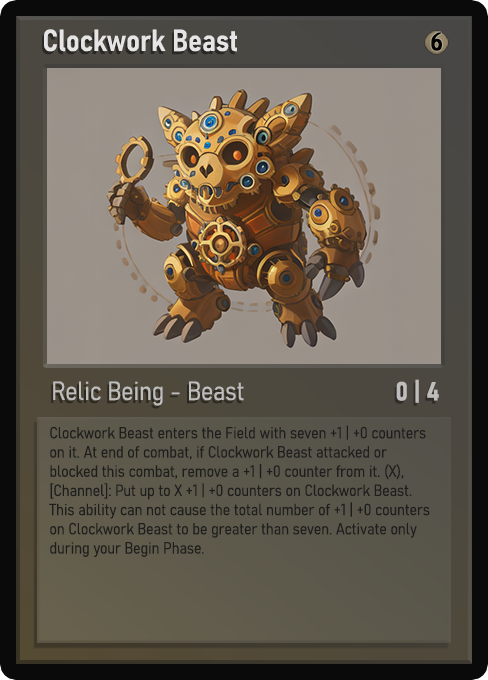
<style>
.page{position:relative;width:488px;height:680px}
.page>*{position:absolute;margin:0}
.t1{font:30px "Bahnschrift-SemiBoldSemiCondensed";color:#f2f2f2;font-weight:bold}
.t2{font:25px "WTRRoycroft";color:#000000;font-weight:bold;scale:1.09 1}
.t3{font:26px "Bahnschrift-LightSemiCondensed";color:#c8c8c8;font-weight:bold}
.t4{font:26px "Bahnschrift-BoldSemiCondensed";color:#bfbebd;font-weight:bold}
.t5{font:16px "Bahnschrift-LightSemiCondensed";color:#1e1e1e;font-weight:bold}
</style>
<div class="page">
<p class="t1" style="left:44px;top:29px;width:193px;height:23px;opacity:0.9">Clockwork Beast</p>
<p class="t2" style="left:431px;top:32px;width:11px;height:19px">6</p>
<p class="t3" style="left:53px;top:381px;width:191px;height:25px;opacity:0.9">Relic Being - Beast</p>
<p class="t4" style="left:396px;top:379px;width:43px;height:24px">0 | 4</p>
<p class="t5" style="left:49px;top:425px;width:381px;height:132px">Clockwork Beast enters the Field with seven +1 | +0 counters on it. At end of combat, if Clockwork Beast attacked or blocked this combat, remove a +1 | +0 counter from it. (X), [Channel]: Put up to X +1 | +0 counters on Clockwork Beast. This ability can not cause the total number of +1 | +0 counters on Clockwork Beast to be greater than seven. Activate only during your Begin Phase.</p>
</div>
